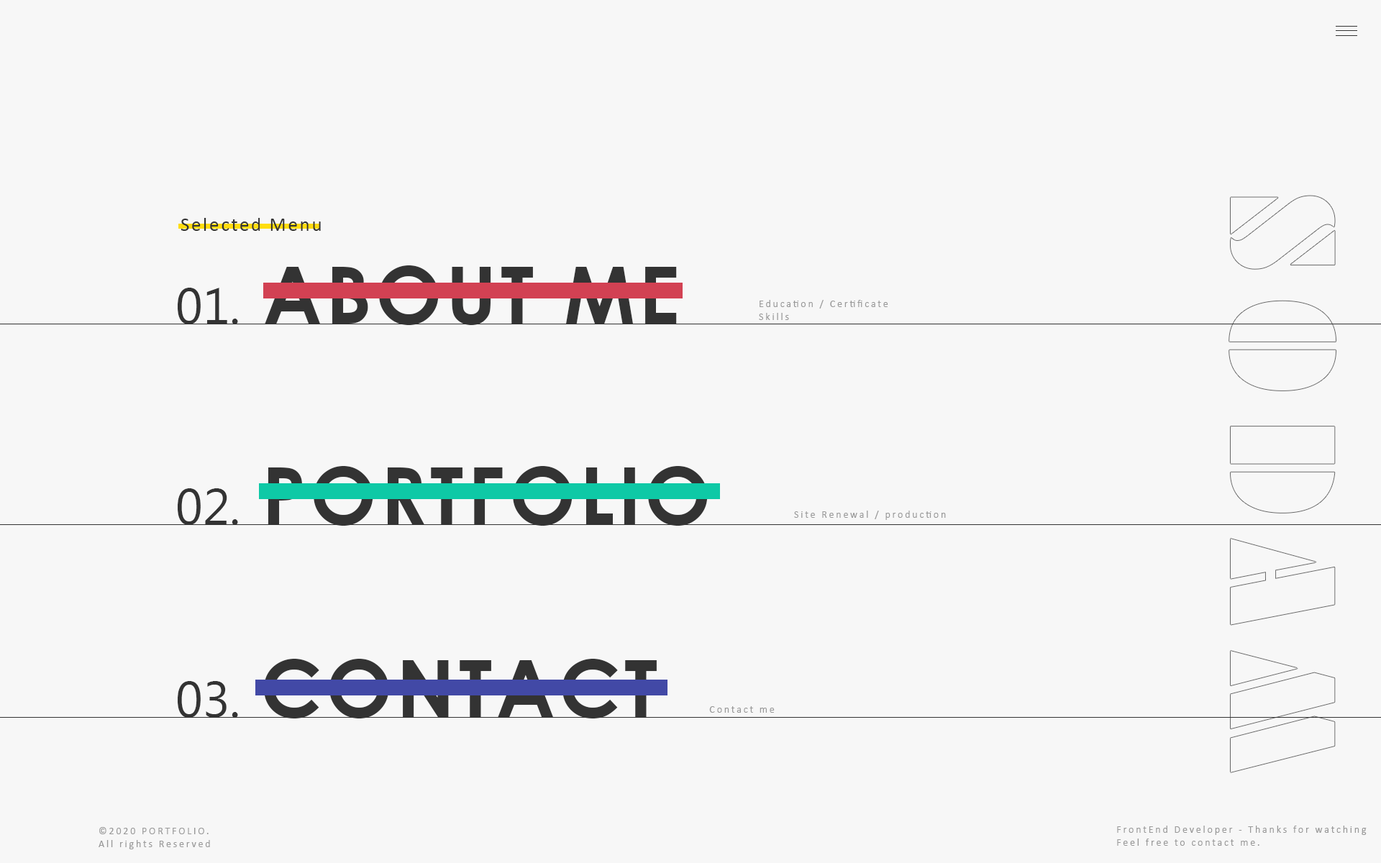
<style>
.page{position:relative;width:1381px;height:863px;background:#f7f7f7}
.page>*{position:absolute;margin:0}
.t1{font:19.4px "Calibri";letter-spacing:0.1em;color:#333333}
.t2{font:79.1px "CenturyGothic-Bold";letter-spacing:0.05em;color:#333333;text-transform:uppercase}
.t3{font:50.4px "Ebrima";color:#333333}
.t4{font:10.1px/12.9px "Calibri";letter-spacing:0.2em;color:#999999}
.t5{font:10.1px "Calibri";letter-spacing:0.2em;color:#999999}
</style>
<div class="page">
<p class="t1" style="left:181px;top:218px;width:140px;height:13px">Selected Menu</p>
<p class="t2" style="left:265px;top:265px;width:412px;height:60px">about me</p>
<p class="t3" style="left:178px;top:288px;width:60px;height:36px">01.</p>
<p class="t4" style="left:759px;top:300px;width:129px;height:20px">Education / Certificate<br>Skills</p>
<p class="t2" style="left:268px;top:466px;width:440px;height:60px">portfolio</p>
<p class="t3" style="left:178px;top:488px;width:60px;height:37px">02.</p>
<p class="t5" style="left:794px;top:511px;width:152px;height:9px">Site Renewal / production</p>
<p class="t2" style="left:264px;top:659px;width:393px;height:60px">contact</p>
<p class="t3" style="left:178px;top:681px;width:60px;height:37px">03.</p>
<p class="t5" style="left:709px;top:706px;width:66px;height:7px">Contact me</p>
<p class="t4" style="left:99px;top:827px;width:111px;height:23px">©2020 PORTFOLIO.<br>All rights Reserved</p>
<p class="t4" style="left:1117px;top:826px;width:250px;height:20px">FrontEnd Developer - Thanks for watching<br>Feel free to contact me.</p>
</div>
